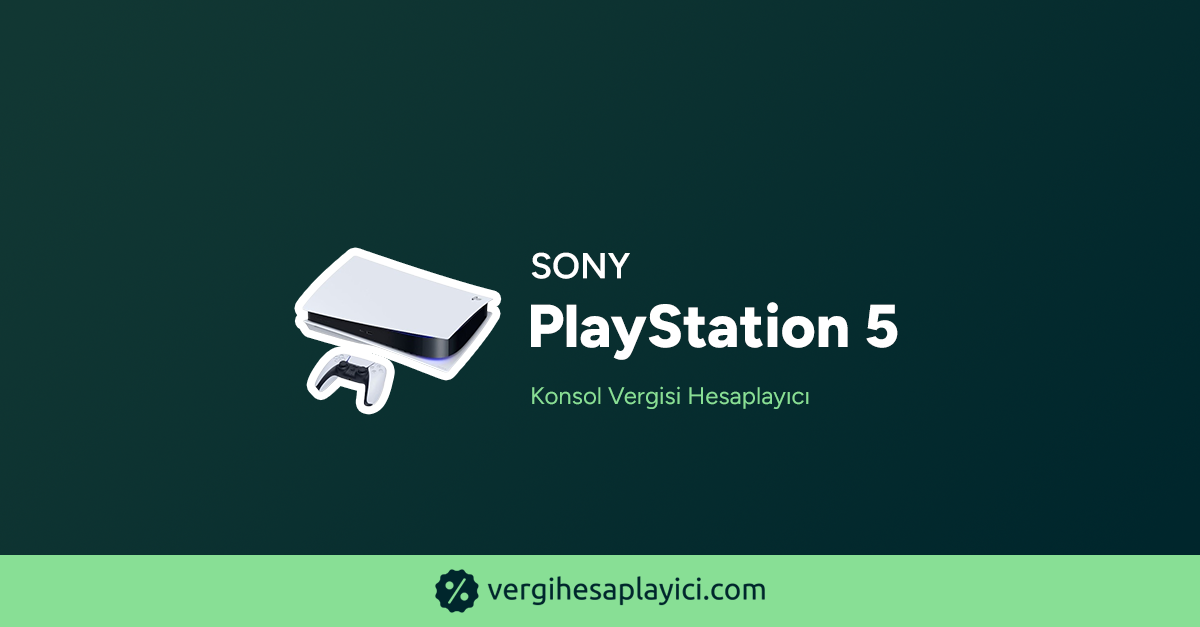
<style>
.page{position:relative;width:1200px;height:627px}
.page>*{position:absolute;margin:0}
.t1{font:36px "Figtree-SemiBold";color:#ffffff;text-transform:uppercase;font-weight:bold}
.t2{font:60.3px "Figtree-ExtraBold";color:#ffffff;font-weight:bold}
.t3{font:24px "Figtree-Regular";color:#88df95;font-weight:bold}
</style>
<div class="page">
<p class="t1" style="left:531px;top:252px;width:99px;height:27px">Sony</p>
<p class="t2" style="left:531px;top:302px;width:367px;height:58px">PlayStation 5</p>
<p class="t3" style="left:532px;top:386px;width:277px;height:23px">Konsol Vergisi Hesaplayıcı</p>
</div>
